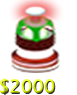
<style>
.page{position:relative;width:77px;height:95px;background:#ffffff}
.page>*{position:absolute;margin:0}
.t1{font:19px "LucidaConsole"}
</style>
<div class="page">
<p class="t1" style="left:0px;top:78px;width:55px;height:16px">$2000</p>
</div>
